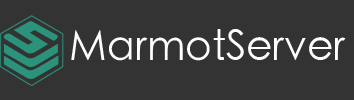
<style>
.page{position:relative;width:354px;height:100px;background:#333333}
.page>*{position:absolute;margin:0}
.t1{font:40.7px "STHeitiSC-Light";color:#fefefe}
</style>
<div class="page">
<p class="t1" style="left:71px;top:29px;width:275px;height:32px">MarmotServer</p>
</div>
